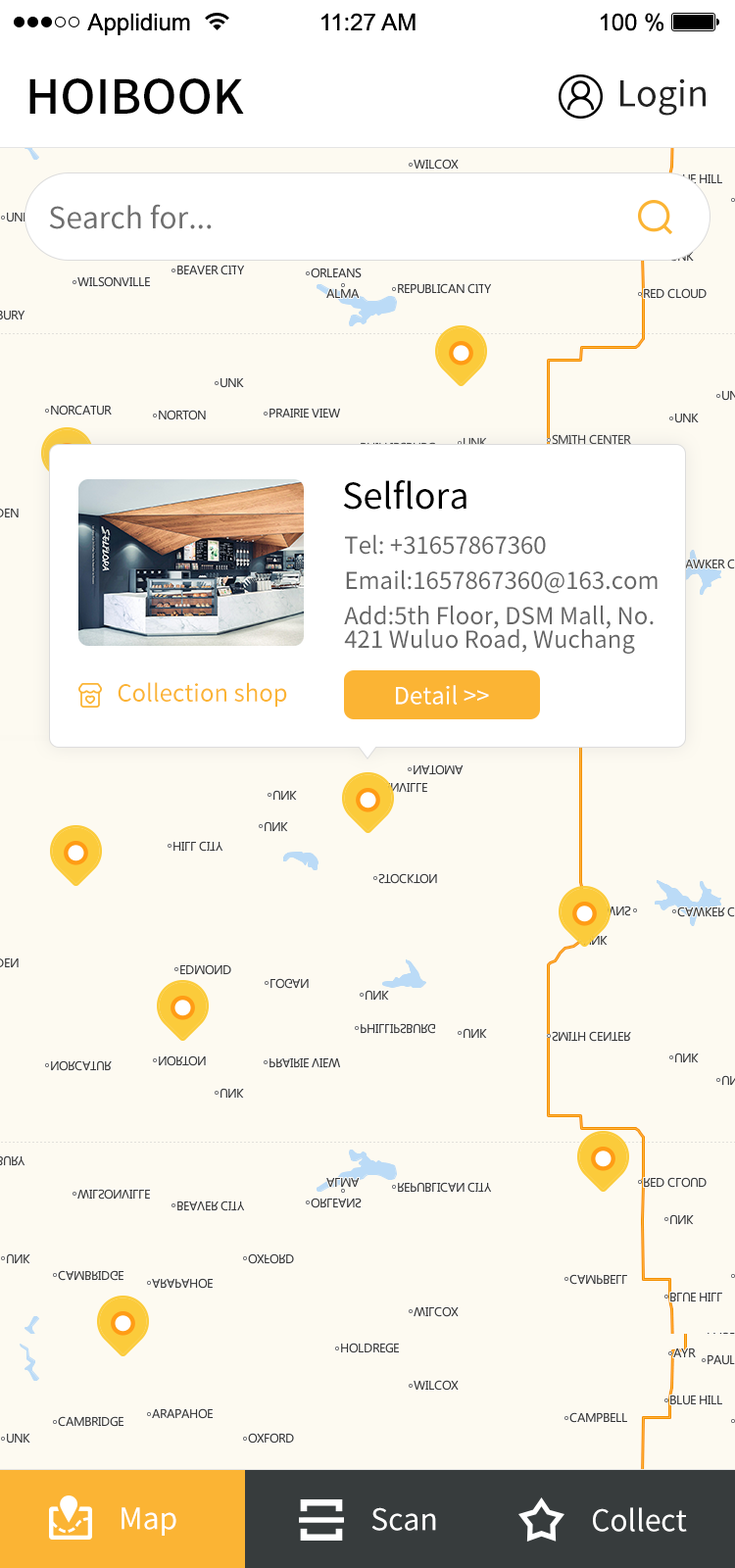
<style>
.page{position:relative;width:735px;height:1568px;background:#fdfaf1}
.page>*{position:absolute;margin:0}
.t1{font:47px "SourceHanSansCN-Medium";color:#010101;text-transform:uppercase}
.t2{font:35.3px "SourceHanSansCN-Regular";color:#222222}
.t3{font:29.4px "SourceHanSansCN-Regular";color:#6f6f6f}
.t4{font:35.3px "SourceHanSansCN-Regular";color:#000000}
.t5{font:23.5px/35.3px "SourceHanSansCN-Regular";color:#666666}
.t6{font:23.5px/23.5px "SourceHanSansCN-Regular";color:#666666}
.t7{font:23.5px "SourceHanSansCN-Regular";color:#fbb434}
.t8{font:23.5px "SourceHanSansCN-Regular";color:#ffffff}
.t9{font:29.4px "SourceHanSansCN-Regular";color:#ffffff}
</style>
<div class="page">
<p class="t1" style="left:29px;top:78px;width:215px;height:37px">HoiBook</p>
<p class="t2" style="left:620px;top:78px;width:86px;height:38px">Login</p>
<p class="t3" style="left:49px;top:204px;width:163px;height:25px">Search for...</p>
<p class="t4" style="left:343px;top:480px;width:123px;height:30px">Selflora</p>
<p class="t5" style="left:344px;top:534px;width:314px;height:120px">Tel: +31657867360<br>Email:1657867360@163.com<br>Add:5th Floor, DSM Mall, N<span class="t6">o.<br>421 Wuluo Road, Wuchang</span></p>
<p class="t7" style="left:118px;top:682px;width:169px;height:26px">Collection shop</p>
<p class="t8" style="left:396px;top:685px;width:93px;height:20px">Detail &gt;&gt;</p>
<p class="t9" style="left:122px;top:1507px;width:54px;height:29px">Map</p>
<p class="t9" style="left:371px;top:1507px;width:65px;height:24px">Scan</p>
<p class="t9" style="left:593px;top:1507px;width:94px;height:25px">Collect</p>
</div>
